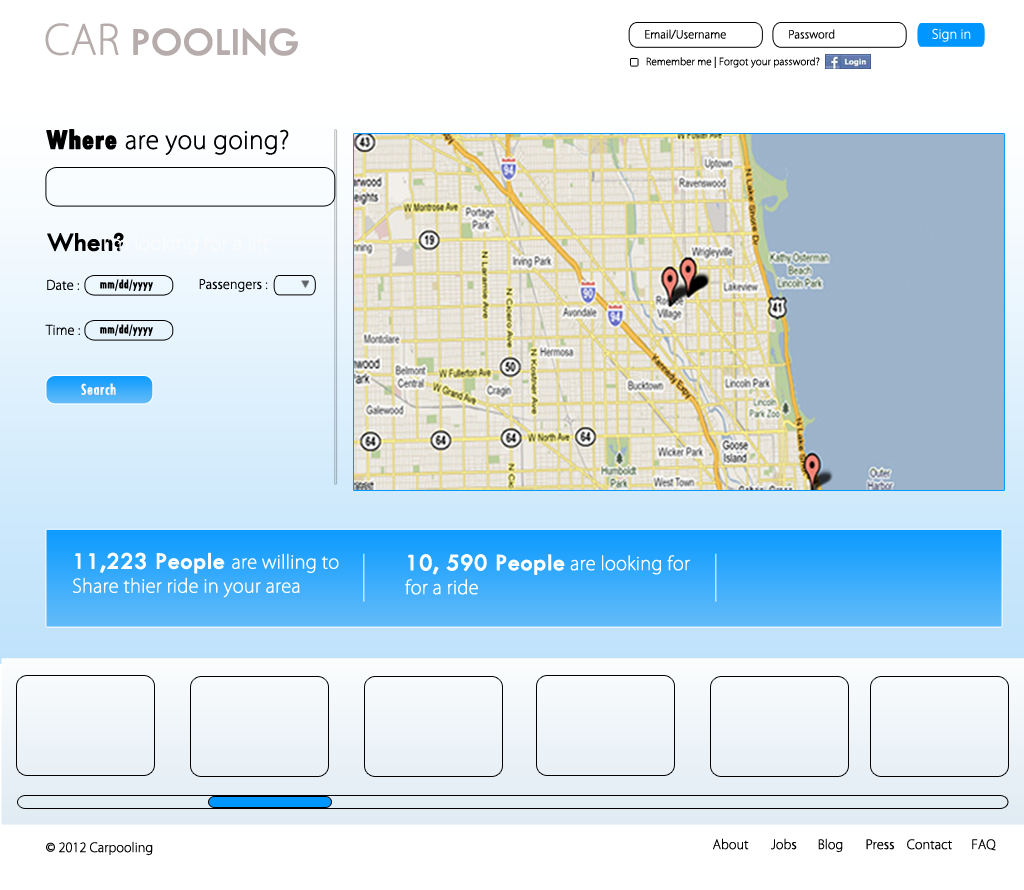
<style>
.page{position:relative;width:1024px;height:890px}
.page>*{position:absolute;margin:0}
.t1{font:39.7px "TwCenMT-Regular";color:#b7acac;font-weight:bold}
.t2{font:39.7px "KozGoPr6N-ExtraLight";color:#b7acac;font-weight:bold}
.t3{font:10.7px "KozGoPr6N-ExtraLight";color:#000000;font-weight:bold}
.t4{font:12.5px "KozGoPr6N-ExtraLight";color:#ffffff;font-weight:bold}
.t5{font:9.6px "KozGoPr6N-ExtraLight";color:#000000;font-weight:bold}
.t6{font:24px "KozGoPr6N-ExtraLight";color:#000000;font-weight:bold}
.t7{font:27.8px "TwCenMT-CondensedExtraBold";color:#000000;font-weight:bold}
.t8{font:26.9px "TwCenMT-Regular";color:#000000;font-weight:bold}
.t9{font:12.6px "KozGoPr6N-ExtraLight";color:#000000;font-weight:bold}
.t10{font:13px "TwCenMT-Condensed";color:#000000;font-weight:bold}
.t11{font:12.4px "KozGoPr6N-ExtraLight";color:#000000;font-weight:bold}
.t12{font:17px "TwCenMT-Condensed";color:#ffffff;font-weight:bold}
.t13{font:18px/24px "KozGoPr6N-ExtraLight";color:#fdfdfd;font-weight:bold}
.t14{font:24px/24px "TwCenMT-Regular";color:#fdfdfd;font-weight:bold}
.t15{font:18px/24px "KozGoPr6N-ExtraLight";color:#fefefe;font-weight:bold}
.t16{font:24px/24px "TwCenMT-Regular";color:#fefefe;font-weight:bold}
</style>
<div class="page">
<p class="t1" style="left:45px;top:23px;width:253px;height:33px"><span class="t2">CAR </span>POOLING</p>
<p class="t3" style="left:645px;top:29px;width:81px;height:10px">Email/Username</p>
<p class="t3" style="left:789px;top:29px;width:46px;height:10px">Password</p>
<p class="t4" style="left:932px;top:28px;width:39px;height:14px">Sign in</p>
<p class="t5" style="left:646px;top:56px;width:174px;height:12px">Remember me | Forgot your password?</p>
<p class="t6" style="left:46px;top:129px;width:243px;height:26px"><span class="t7">Where </span>are you going?</p>
<p class="t8" style="left:47px;top:232px;width:77px;height:20px">When?</p>
<p class="t9" style="left:47px;top:279px;width:32px;height:12px">Date :</p>
<p class="t10" style="left:100px;top:279px;width:53px;height:12px">mm/dd/yyyy</p>
<p class="t11" style="left:199px;top:279px;width:69px;height:13px">Passengers :</p>
<p class="t9" style="left:45px;top:324px;width:35px;height:11px">Time :</p>
<p class="t10" style="left:100px;top:324px;width:53px;height:12px">mm/dd/yyyy</p>
<p class="t12" style="left:81px;top:383px;width:35px;height:13px">Search</p>
<p class="t13" style="left:72px;top:552px;width:267px;height:46px"><span class="t14">11,223 People </span>are willing to <br>Share thier ride in your area</p>
<p class="t15" style="left:405px;top:554px;width:285px;height:41px"><span class="t16">10, 590 People</span> are looking for <br>for a ride</p>
<p class="t11" style="left:46px;top:841px;width:107px;height:15px">© 2012 Carpooling</p>
<p class="t11" style="left:713px;top:838px;width:283px;height:15px">About       Jobs      Blog       Press   Contact      FAQ</p>
</div>
